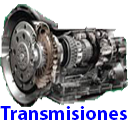
<style>
.page{position:relative;width:128px;height:128px;background:#ffffff}
.page>*{position:absolute;margin:0}
.t1{font:20px "MyriadPro-Bold";color:#0000ff}
</style>
<div class="page">
<p class="t1" style="left:0px;top:106px;width:127px;height:14px">Transmisiones</p>
</div>
